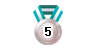
<style>
.page{position:relative;width:100px;height:50px;background:#ffffff}
.page>*{position:absolute;margin:0}
.t1{font:12px "Dotum";color:#000000;font-weight:bold}
</style>
<div class="page">
<p class="t1" style="left:45px;top:27px;width:6px;height:9px">5</p>
</div>
